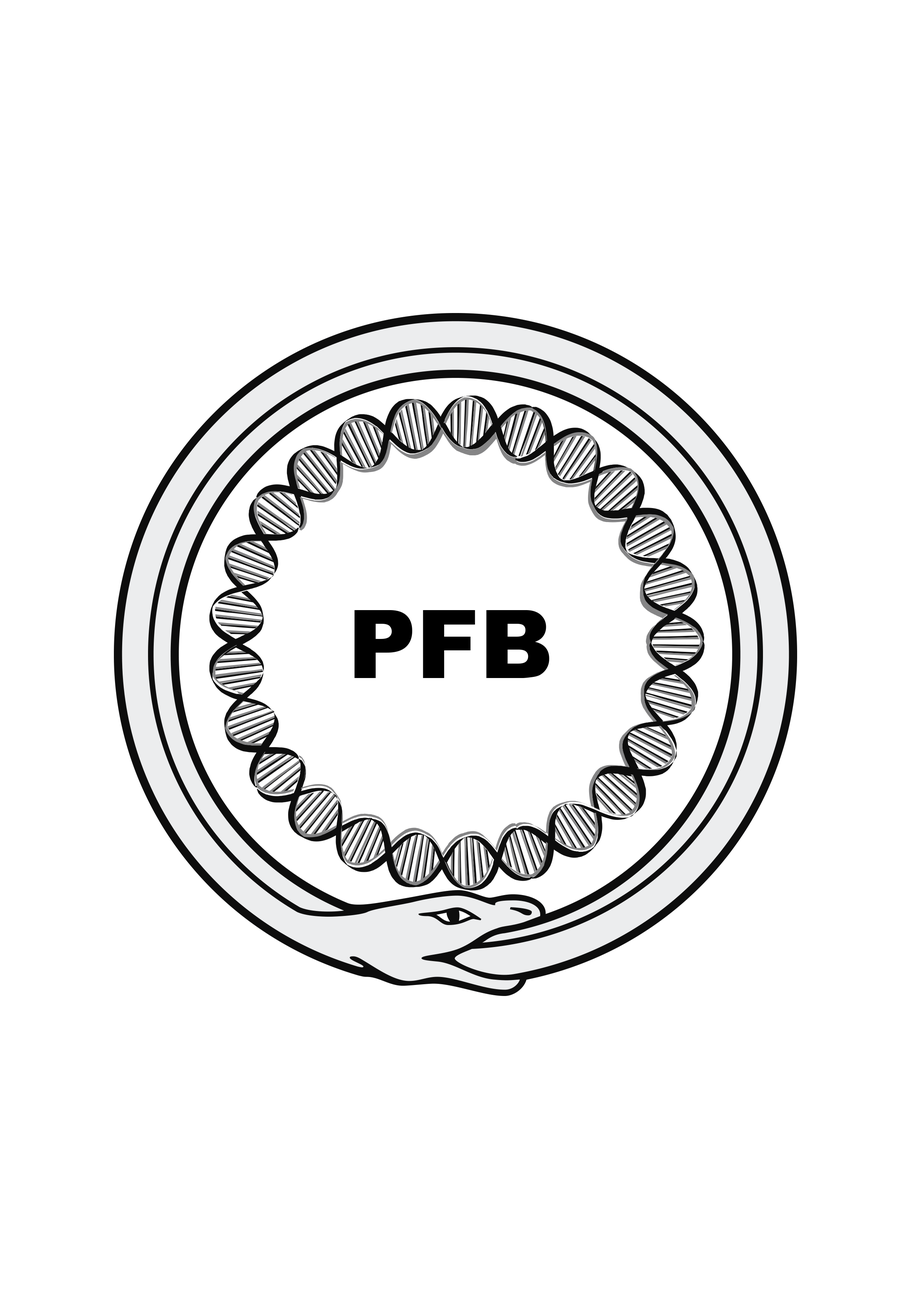
<style>
.page{position:relative;width:911px;height:1309px;background:#ffffff}
.page>*{position:absolute;margin:0}
.t1{font:94.9px "Arial-Black";color:#000000}
</style>
<div class="page">
<p class="t1" style="left:354px;top:610px;width:195px;height:68px">PFB</p>
</div>
